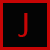
<style>
.page{position:relative;width:50px;height:50px;background:#040404}
.page>*{position:absolute;margin:0}
.t1{font:27.6px "LucidaGrande";color:#c70505}
</style>
<div class="page">
<p class="t1" style="left:18px;top:13px;width:10px;height:24px">J</p>
</div>
